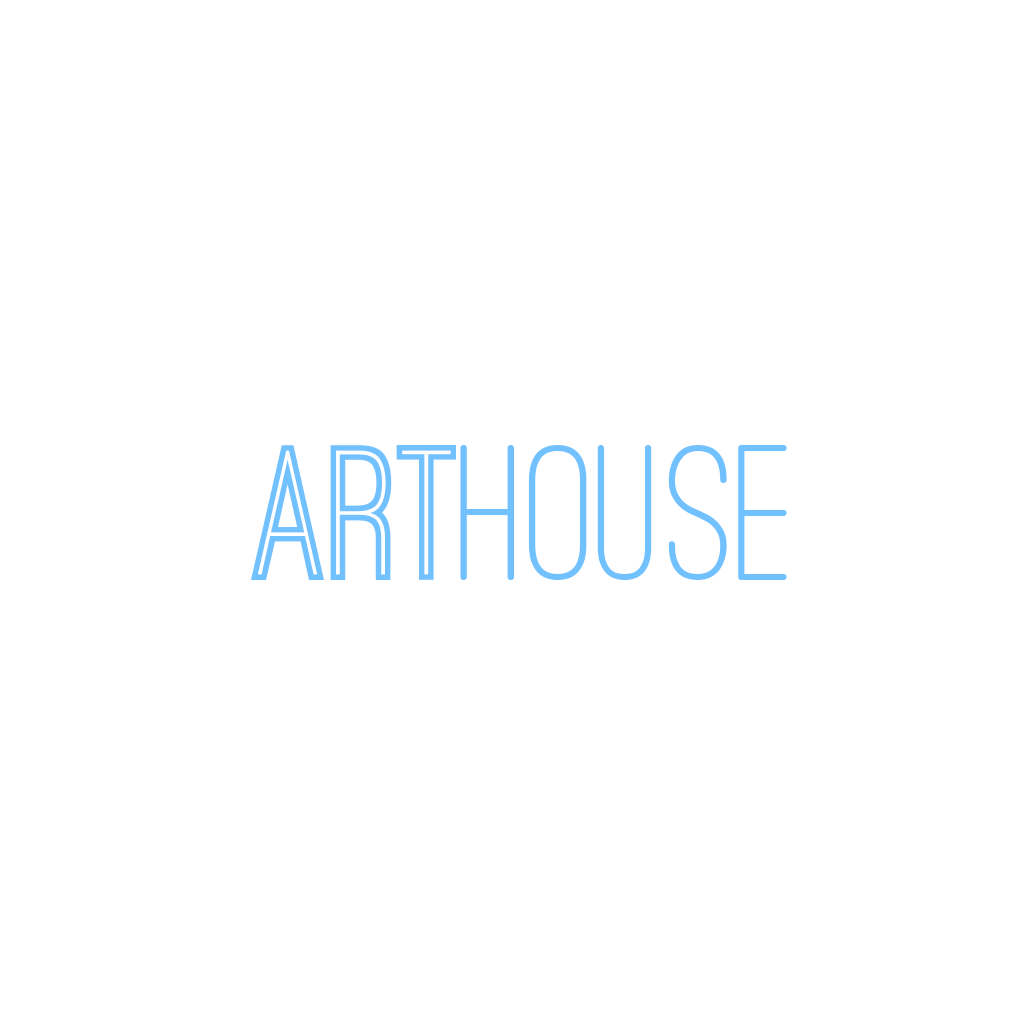
<style>
.page{position:relative;width:1024px;height:1024px;background:#ffffff}
.page>*{position:absolute;margin:0}
.t1{font:200px "OstrichSansInline";color:#71c1ff}
.t2{font:200px "OstrichSansRounded-Medium";color:#71c1ff}
</style>
<div class="page">
<p class="t1" style="left:251px;top:445px;width:205px;height:135px">ART</p>
<p class="t2" style="left:460px;top:445px;width:327px;height:135px">HOUSE</p>
</div>
